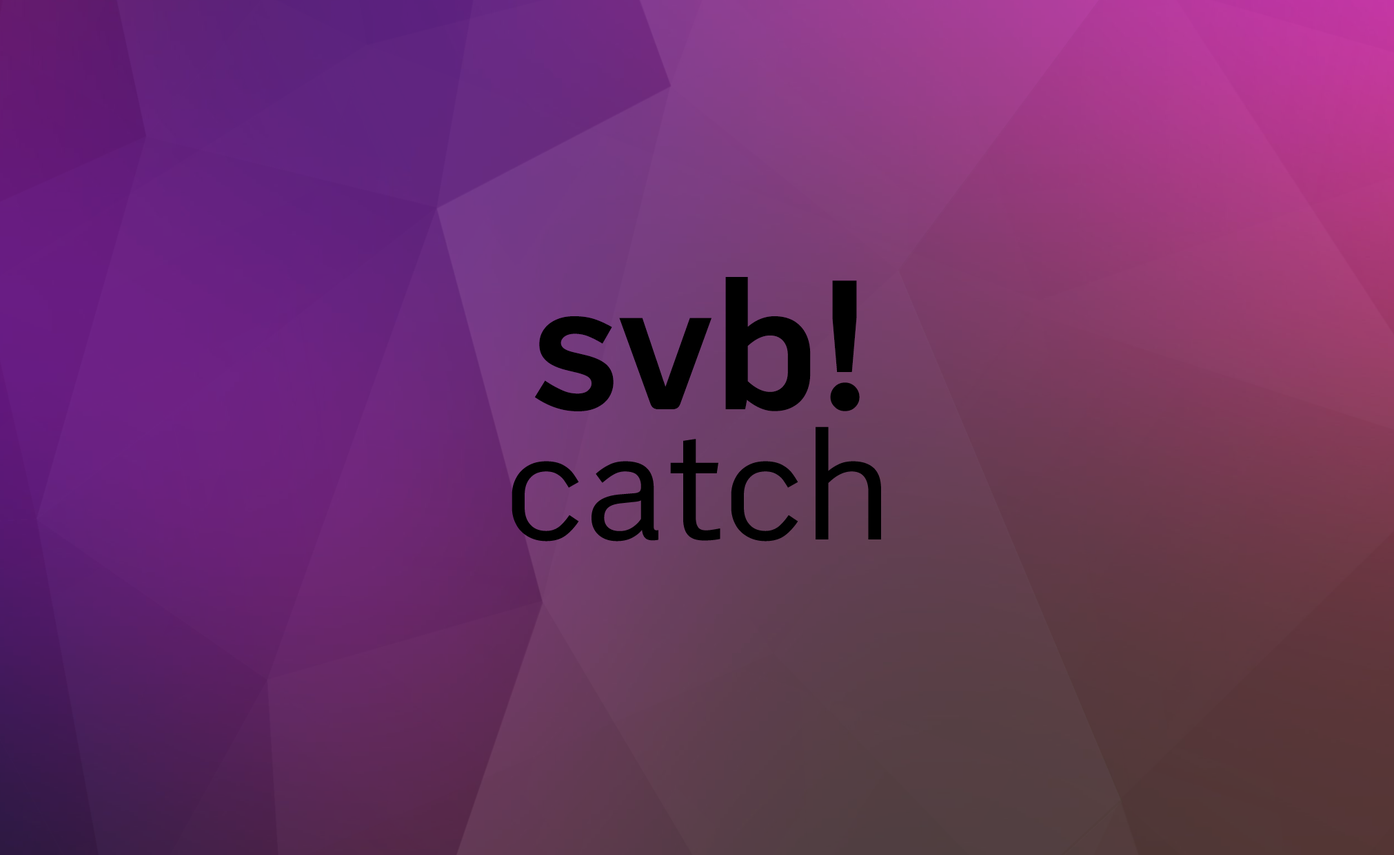
<style>
.page{position:relative;width:1394px;height:855px}
.page>*{position:absolute;margin:0}
.t1{font:183.8px "PublikBold";color:#000000}
.t2{font:156.3px "PublikRegularBook";color:#000000}
</style>
<div class="page">
<p class="t1" style="left:535px;top:277px;width:325px;height:135px">svb!</p>
<p class="t2" style="left:511px;top:427px;width:370px;height:115px">catch</p>
</div>
